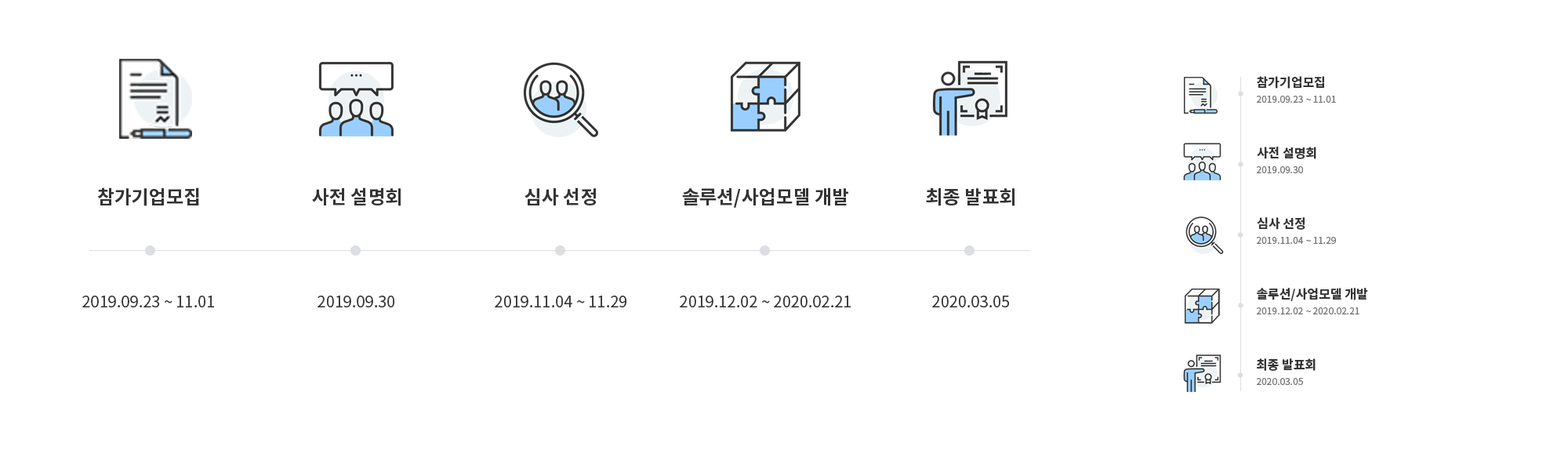
<style>
.page{position:relative;width:1568px;height:465px;background:#ffffff}
.page>*{position:absolute;margin:0}
.t1{font:12.5px "NotoSansKR-Bold";color:#333333}
.t2{font:9.4px "NotoSansKR-Regular";color:#787878}
.t3{font:18.8px "NotoSansKR-Bold";color:#333333}
.t4{font:15.7px "NotoSansKR-Regular";color:#333333}
</style>
<div class="page">
<p class="t1" style="left:1257px;top:76px;width:67px;height:13px">참가기업모집</p>
<p class="t2" style="left:1257px;top:96px;width:79px;height:7px">2019.09.23 ~ 11.01</p>
<p class="t1" style="left:1257px;top:147px;width:59px;height:12px">사전 설명회</p>
<p class="t2" style="left:1257px;top:166px;width:46px;height:7px">2019.09.30</p>
<p class="t3" style="left:98px;top:187px;width:101px;height:19px">참가기업모집</p>
<p class="t3" style="left:312px;top:187px;width:89px;height:19px">사전 설명회</p>
<p class="t3" style="left:524px;top:187px;width:72px;height:18px">심사 선정</p>
<p class="t3" style="left:682px;top:187px;width:166px;height:21px">솔루션/사업모델 개발</p>
<p class="t3" style="left:926px;top:188px;width:88px;height:18px">최종 발표회</p>
<p class="t1" style="left:1257px;top:217px;width:48px;height:13px">심사 선정</p>
<p class="t2" style="left:1257px;top:237px;width:79px;height:7px">2019.11.04 ~ 11.29</p>
<p class="t1" style="left:1257px;top:288px;width:111px;height:13px">솔루션/사업모델 개발</p>
<p class="t4" style="left:82px;top:296px;width:132px;height:11px">2019.09.23 ~ 11.01</p>
<p class="t4" style="left:318px;top:296px;width:76px;height:11px">2019.09.30</p>
<p class="t4" style="left:495px;top:296px;width:131px;height:11px">2019.11.04 ~ 11.29</p>
<p class="t4" style="left:680px;top:296px;width:171px;height:11px">2019.12.02 ~ 2020.02.21</p>
<p class="t4" style="left:932px;top:296px;width:77px;height:11px">2020.03.05</p>
<p class="t2" style="left:1257px;top:307px;width:102px;height:7px">2019.12.02 ~ 2020.02.21</p>
<p class="t1" style="left:1257px;top:358px;width:59px;height:13px">최종 발표회</p>
<p class="t2" style="left:1257px;top:378px;width:46px;height:7px">2020.03.05</p>
</div>
